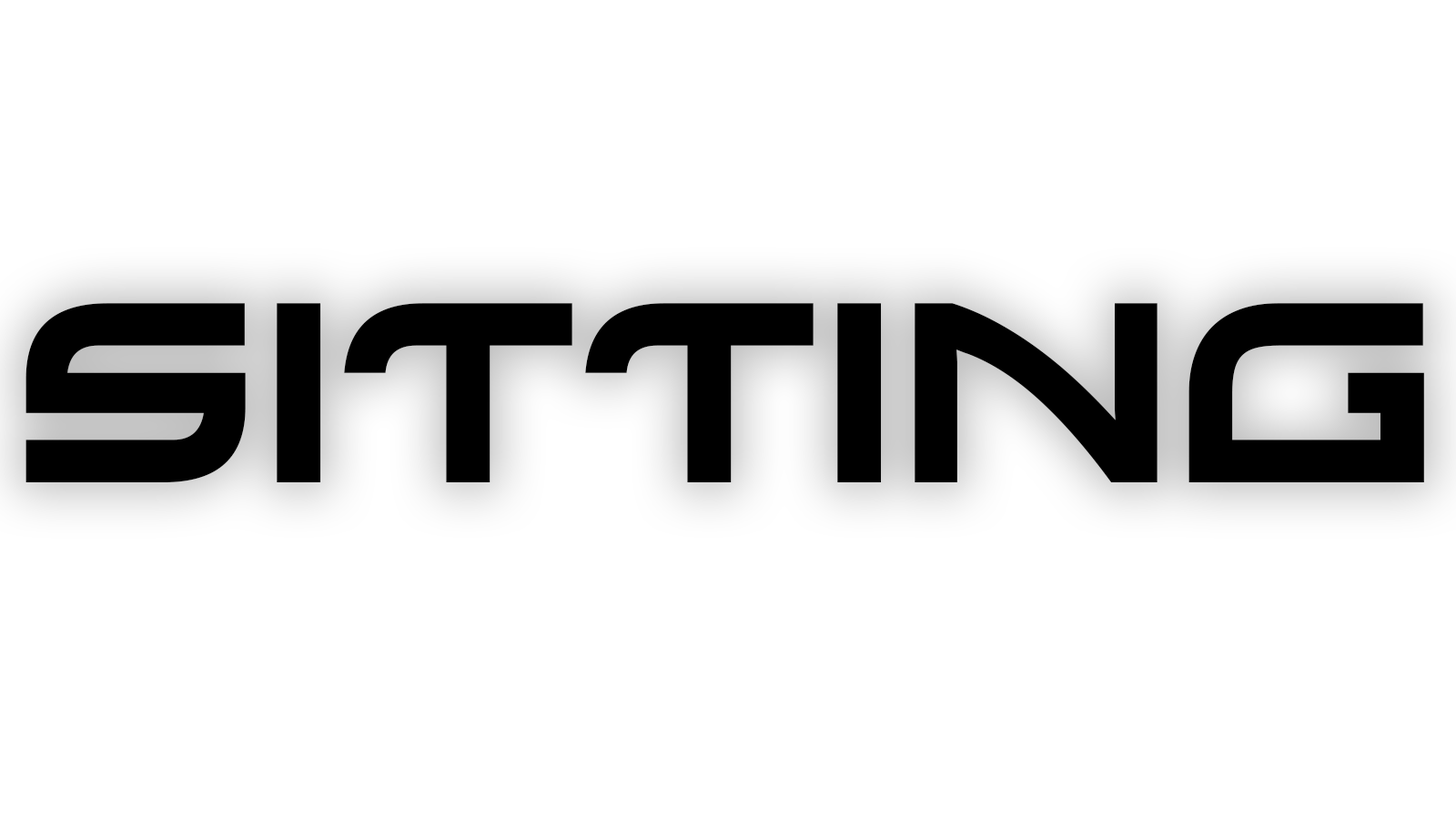
<style>
.page{position:relative;width:1456px;height:819px;background:#ffffff}
.page>*{position:absolute;margin:0}
.t1{font:255.3px "Xirod-Regular";color:#000000}
</style>
<div class="page">
<p class="t1" style="left:25px;top:303px;width:1399px;height:179px">Sitting</p>
</div>
